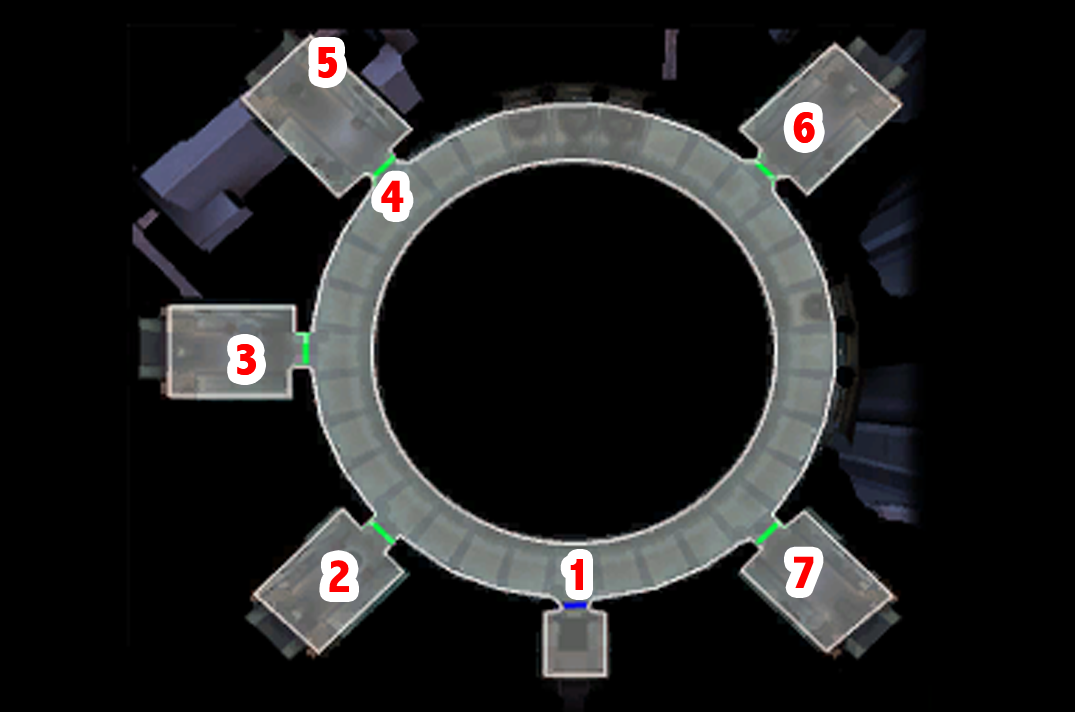
<style>
.page{position:relative;width:1075px;height:712px;background:#000000}
.page>*{position:absolute;margin:0}
.t1{font:48px "AbadiMT-CondensedExtraBold";color:#ff0000}
</style>
<div class="page">
<p class="t1" style="left:318px;top:47px;width:19px;height:31px">5</p>
<p class="t1" style="left:793px;top:112px;width:22px;height:31px">6</p>
<p class="t1" style="left:381px;top:180px;width:23px;height:32px">4</p>
<p class="t1" style="left:237px;top:344px;width:19px;height:31px">3</p>
<p class="t1" style="left:794px;top:556px;width:20px;height:32px">7</p>
<p class="t1" style="left:329px;top:560px;width:20px;height:32px">2</p>
<p class="t1" style="left:570px;top:559px;width:13px;height:31px">1</p>
</div>
